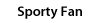
<style>
.page{position:relative;width:100px;height:23px;background:#ffffff}
.page>*{position:absolute;margin:0}
.t1{font:14px "MyriadPro-Semibold";color:#000000}
</style>
<div class="page">
<p class="t1" style="left:17px;top:6px;width:65px;height:13px">Sporty Fan</p>
</div>
